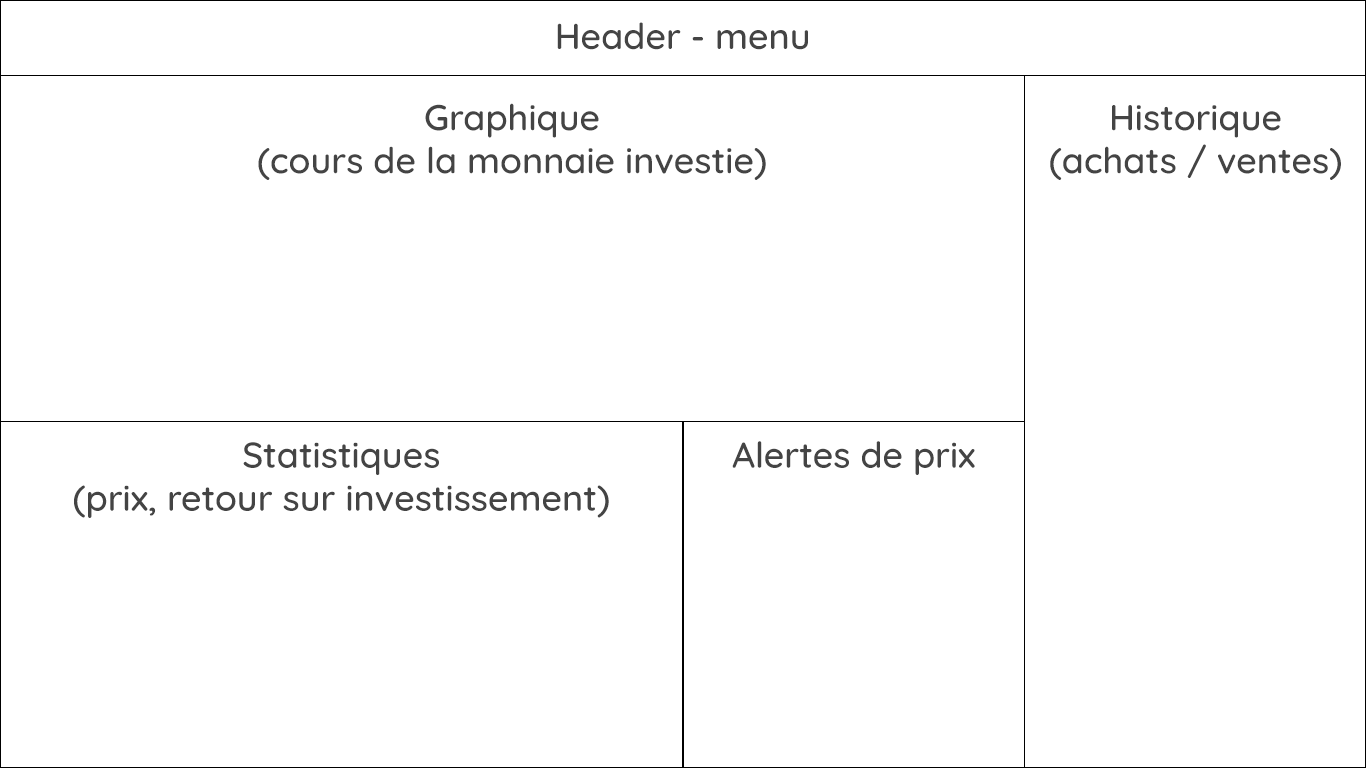
<style>
.page{position:relative;width:1366px;height:768px;background:#ffffff}
.page>*{position:absolute;margin:0}
.t1{font:36px "Quicksand-Medium";color:#444444}
</style>
<div class="page">
<p class="t1" style="left:557px;top:22px;width:251px;height:28px">Header - menu</p>
<p class="t1" style="left:258px;top:103px;width:508px;height:77px;text-align:center">Graphique<br>(cours de la monnaie investie)</p>
<p class="t1" style="left:1050px;top:105px;width:291px;height:75px;text-align:center">Historique<br>(achats / ventes)</p>
<p class="t1" style="left:74px;top:442px;width:535px;height:76px;text-align:center">Statistiques<br>(prix, retour sur investissement)</p>
<p class="t1" style="left:732px;top:441px;width:243px;height:34px">Alertes de prix</p>
</div>
